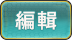
<style>
.page{position:relative;width:72px;height:40px}
.page>*{position:absolute;margin:0}
.t1{font:20px "GothicMB101Pr6N-Medium";letter-spacing:0.1em;color:#fff6f2}
</style>
<div class="page">
<p class="t1" style="left:15px;top:11px;width:42px;height:19px">編輯</p>
</div>
